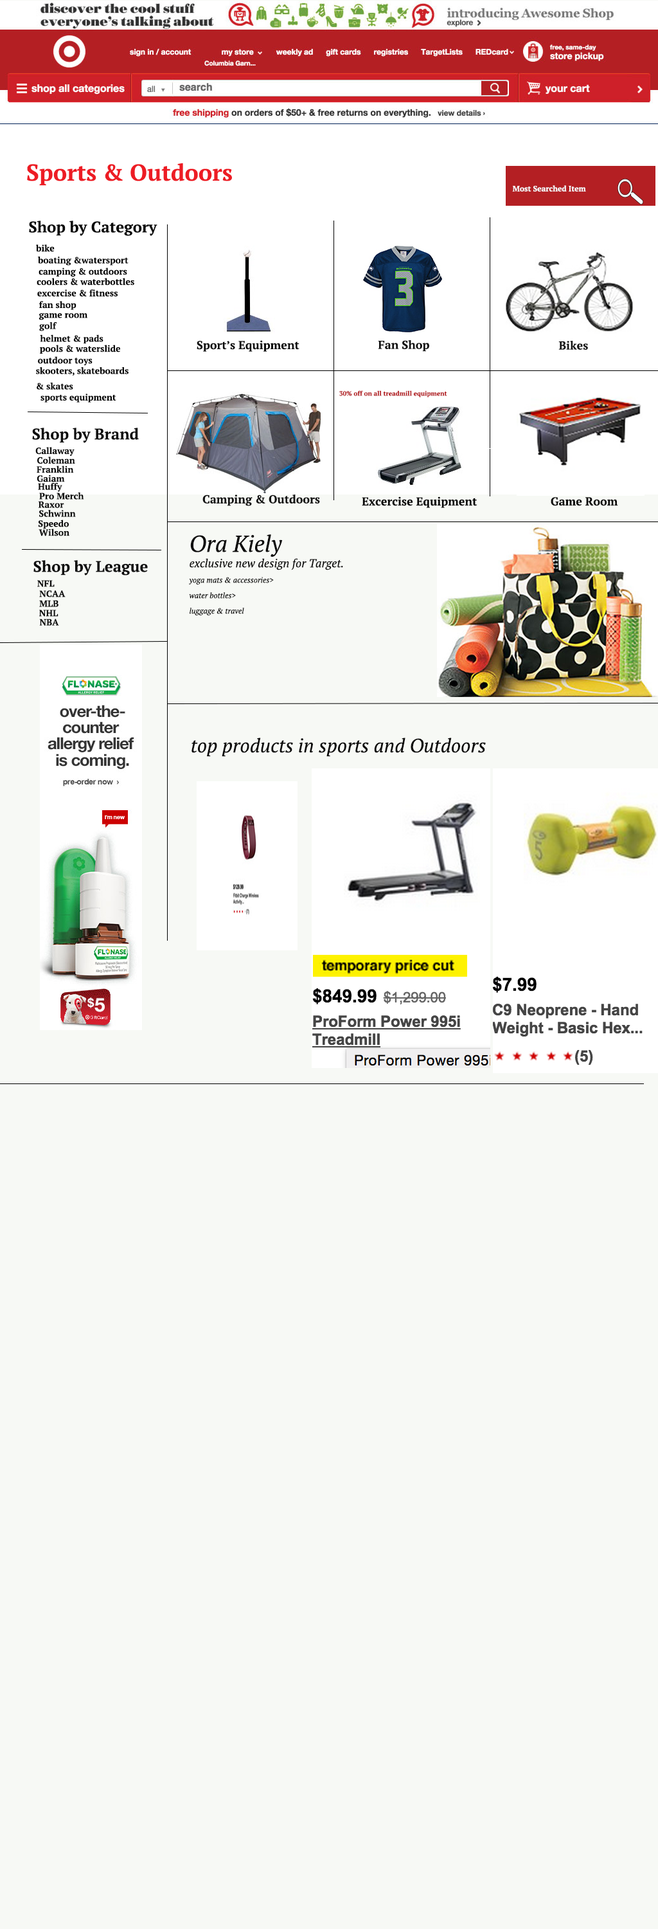
<style>
.page{position:relative;width:658px;height:1929px;background:#f7f9f5}
.page>*{position:absolute;margin:0}
.t1{font:23.1px "PTSerif-Bold";color:#ed1c24}
.t2{font:7.7px "PTSerif-Bold";color:#f8fafc}
.t3{font:15.4px "PTSerif-Bold";color:#060606}
.t4{font:9px "PTSerif-Bold";color:#060606}
.t5{font:11.6px "PTSerif-Bold";color:#0d0d0d}
.t6{font:11.6px "PTSerif-Bold";color:#121212}
.t7{font:9px/15.4px "PTSerif-Bold";color:#060606}
.t8{font:6.4px "PTSerif-Bold";color:#b41f23}
.t9{font:15.4px "PTSerif-Bold";color:#0d0d0d}
.t10{font:9px "PTSerif-Bold";color:#0d0d0d}
.t11{font:11.6px "PTSerif-Bold";color:#060606}
.t12{font:11.6px "PTSerif-Bold";color:#0b0a0a}
.t13{font:7.7px/15.4px "PTSerif-Italic";color:#0b0a0a}
.t14{font:23.1px/15.4px "PTSerif-Italic";color:#0b0a0a}
.t15{font:11.6px/15.4px "PTSerif-Italic";color:#0b0a0a}
.t16{font:19.3px "PTSerif-Italic";color:#0b0a0a}
</style>
<div class="page">
<p class="t1" style="left:27px;top:163px;width:205px;height:23px">Sports &amp; Outdoors</p>
<p class="t2" style="left:512px;top:185px;width:74px;height:7px">Most Searched Item</p>
<p class="t3" style="left:29px;top:221px;width:129px;height:15px">Shop by Category</p>
<p class="t4" style="left:36px;top:244px;width:19px;height:8px">bike</p>
<p class="t4" style="left:37px;top:256px;width:92px;height:10px">boating &amp;watersport</p>
<p class="t4" style="left:39px;top:267px;width:88px;height:10px">camping &amp; outdoors</p>
<p class="t4" style="left:37px;top:278px;width:97px;height:7px">coolers &amp; waterbottles</p>
<p class="t4" style="left:37px;top:289px;width:81px;height:7px">excercise &amp; fitness</p>
<p class="t4" style="left:39px;top:301px;width:37px;height:9px">fan shop</p>
<p class="t4" style="left:39px;top:312px;width:48px;height:8px">game room</p>
<p class="t4" style="left:39px;top:322px;width:18px;height:9px">golf</p>
<p class="t4" style="left:40px;top:334px;width:64px;height:10px">helmet &amp; pads</p>
<p class="t5" style="left:197px;top:340px;width:103px;height:12px">Sport’s Equipment</p>
<p class="t5" style="left:378px;top:340px;width:51px;height:12px">Fan Shop</p>
<p class="t6" style="left:559px;top:341px;width:29px;height:9px">Bikes</p>
<p class="t4" style="left:40px;top:345px;width:80px;height:9px">pools &amp; waterslide</p>
<p class="t4" style="left:38px;top:356px;width:55px;height:10px">outdoor toys</p>
<p class="t7" style="left:36px;top:367px;width:93px;height:23px">skooters, skateboards <br>&amp; skates</p>
<p class="t4" style="left:40px;top:393px;width:76px;height:9px">sports equipment</p>
<p class="t8" style="left:339px;top:390px;width:108px;height:7px">30% off on all treadmill equipment</p>
<p class="t9" style="left:32px;top:428px;width:107px;height:15px">Shop by Brand</p>
<p class="t10" style="left:35px;top:447px;width:40px;height:9px">Callaway</p>
<p class="t10" style="left:37px;top:456px;width:38px;height:8px">Coleman</p>
<p class="t10" style="left:37px;top:465px;width:37px;height:8px">Franklin</p>
<p class="t10" style="left:37px;top:474px;width:28px;height:8px">Gaiam</p>
<p class="t10" style="left:38px;top:483px;width:24px;height:9px">Huffy</p>
<p class="t10" style="left:39px;top:492px;width:45px;height:8px">Pro Merch</p>
<p class="t6" style="left:203px;top:494px;width:117px;height:12px">Camping &amp; Outdoors</p>
<p class="t11" style="left:362px;top:496px;width:116px;height:12px">Excercise Equipment</p>
<p class="t12" style="left:551px;top:497px;width:67px;height:9px">Game Room</p>
<p class="t10" style="left:38px;top:501px;width:26px;height:7px">Raxor</p>
<p class="t10" style="left:39px;top:510px;width:37px;height:7px">Schwinn</p>
<p class="t10" style="left:38px;top:519px;width:31px;height:10px">Speedo</p>
<p class="t10" style="left:39px;top:528px;width:30px;height:8px">Wilson</p>
<p class="t13" style="left:189px;top:534px;width:154px;height:81px"><span class="t14">Ora Kiely<br></span><span class="t15">exclusive new design for Target.<br></span>yoga mats &amp; accessories&gt;<br>water bottles&gt;<br>luggage &amp; travel</p>
<p class="t9" style="left:33px;top:560px;width:115px;height:15px">Shop by League</p>
<p class="t10" style="left:37px;top:580px;width:18px;height:7px">NFL</p>
<p class="t10" style="left:39px;top:590px;width:27px;height:7px">NCAA</p>
<p class="t10" style="left:39px;top:600px;width:20px;height:7px">MLB</p>
<p class="t10" style="left:39px;top:609px;width:20px;height:7px">NHL</p>
<p class="t10" style="left:39px;top:618px;width:20px;height:8px">NBA</p>
<p class="t16" style="left:192px;top:737px;width:294px;height:20px">top products in sports and Outdoors</p>
</div>
